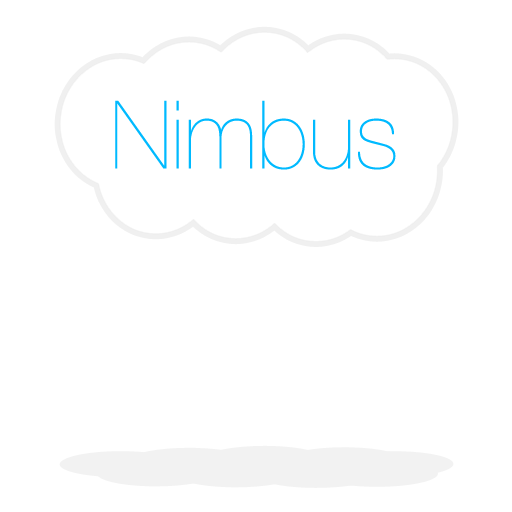
<style>
.page{position:relative;width:512px;height:512px;background:#ffffff}
.page>*{position:absolute;margin:0}
.t1{font:94.5px "HelveticaNeue-UltraLight";color:#00baff}
</style>
<div class="page">
<p class="t1" style="left:115px;top:100px;width:281px;height:70px">Nimbus</p>
</div>
